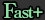
<style>
.page{position:relative;width:45px;height:20px;background:#333333}
.page>*{position:absolute;margin:0}
.t1{font:16px "RyuminPro-ExBold";letter-spacing:-0.08em;color:#90e2a5}
.t2{font:20px "RyuminPro-ExBold";letter-spacing:-0.08em;color:#90e2a5}
</style>
<div class="page">
<p class="t1" style="left:4px;top:3px;width:39px;height:16px"><span class="t2">F</span>ast+</p>
</div>
